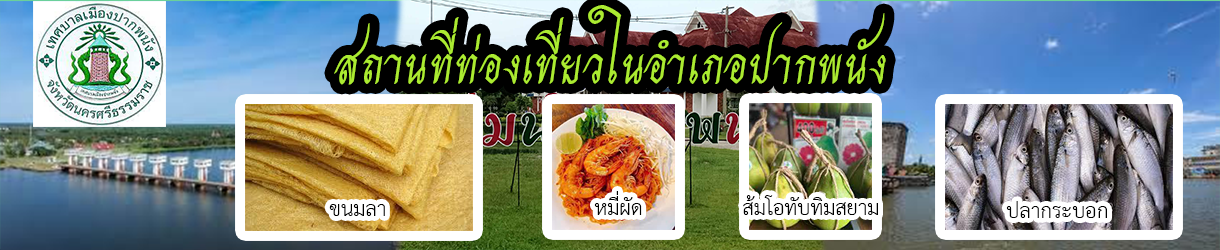
<style>
.page{position:relative;width:1220px;height:250px}
.page>*{position:absolute;margin:0}
.t1{font:72px "THCharmofAU";color:#abeb31}
.t2{font:30px "THSarabunNew";color:#000000}
</style>
<div class="page">
<p class="t1" style="left:334px;top:5px;width:552px;height:80px">สถานที่ท่องเที่ยวในอำเภอปากพนัง</p>
<p class="t2" style="left:594px;top:191px;width:48px;height:24px">หมี่ผัด</p>
<p class="t2" style="left:743px;top:195px;width:135px;height:20px">ส้มโอทับทิมสยาม</p>
<p class="t2" style="left:329px;top:204px;width:56px;height:12px">ขนมลา</p>
<p class="t2" style="left:1006px;top:201px;width:101px;height:17px">ปลากระบอก</p>
</div>
